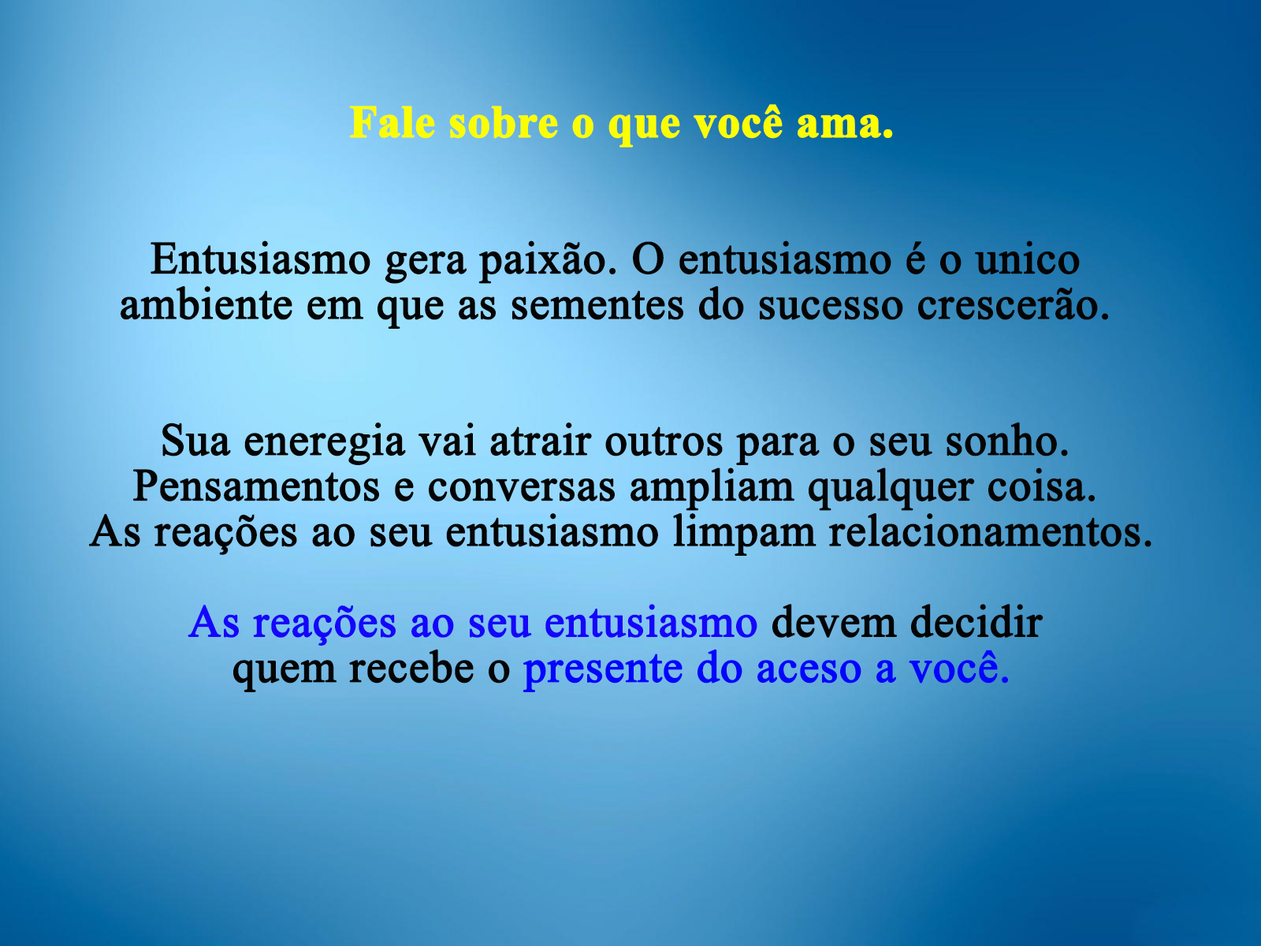
<style>
.page{position:relative;width:1261px;height:946px}
.page>*{position:absolute;margin:0}
.t1{font:45.4px "TimesNewRomanPSMT";color:#040404;font-weight:bold}
.t2{font:45.4px "TimesNewRomanPS-BoldMT";color:#fbfe00;font-weight:bold}
.t3{font:45.4px "TimesNewRomanPSMT";color:#1605fa;font-weight:bold}
.t4{font:45.4px "TimesNewRomanPSMT";color:#0404fc;font-weight:bold}
</style>
<div class="page">
<p class="t1" style="left:89px;top:104px;width:1062px;height:588px;text-align:center"><span class="t2">Fale sobre o que você ama.<br> <br></span><br>Entusiasmo gera paixão. O entusiasmo é o unico <br>ambiente em que as sementes do sucesso crescerão. <br><br><br>Sua eneregia vai atrair outros para o seu sonho. <br>Pensamentos e conversas ampliam qualquer coisa. <br>As reações ao seu entusiasmo limpam relacionamentos.<br><br><span class="t3">As reações ao seu entusiasmo</span> devem decidir <br>quem recebe o <span class="t4">presente do aceso a você.</span></p>
</div>
